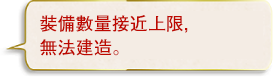
<style>
.page{position:relative;width:274px;height:78px;background:#f4ece4}
.page>*{position:absolute;margin:0}
.t1{font:18px/24px "FutoGoB101Pr5-Bold";color:#bd0800}
</style>
<div class="page">
<p class="t1" style="left:40px;top:15px;width:148px;height:41px">裝備數量接近上限，<br>無法建造。</p>
</div>
